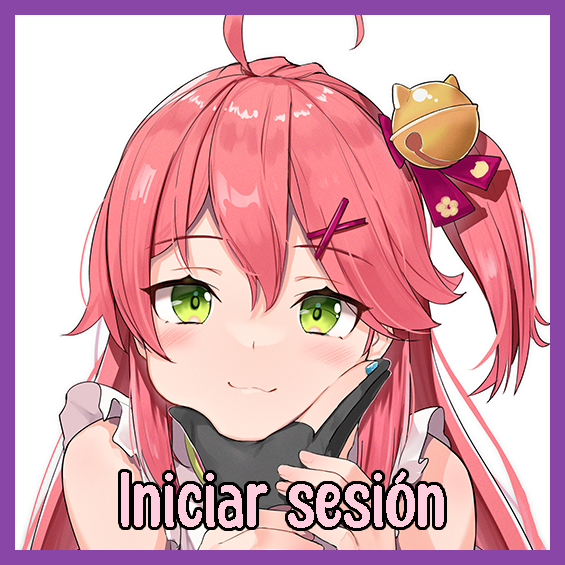
<style>
.page{position:relative;width:565px;height:565px;background:#ffffff}
.page>*{position:absolute;margin:0}
.t1{font:85.1px "HoneyNotes-Regular";color:#ffcddd}
</style>
<div class="page">
<p class="t1" style="left:121px;top:471px;width:323px;height:57px">Iniciar sesión</p>
</div>
